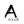
<style>
.page{position:relative;width:24px;height:24px;background:#ffffff}
.page>*{position:absolute;margin:0}
.t1{font:17.8px "Chalkduster";color:#000000}
.t2{font:4px "MyriadPro-Regular"}
</style>
<div class="page">
<p class="t1" style="left:4px;top:4px;width:13px;height:14px">A</p>
<p class="t2" style="left:8px;top:17px;width:11px;height:4px">nnuuh</p>
</div>
